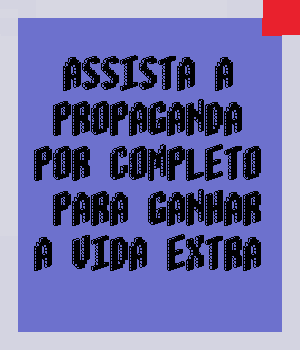
<style>
.page{position:relative;width:300px;height:350px;background:#6d71cd}
.page>*{position:absolute;margin:0}
.t1{font:37.5px "Blox-(BRK";color:#010101}
</style>
<div class="page">
<p class="t1" style="left:34px;top:55px;width:227px;height:216px;text-align:center">assista a<br>propaganda por completo<br> para ganhar a vida extra</p>
</div>
